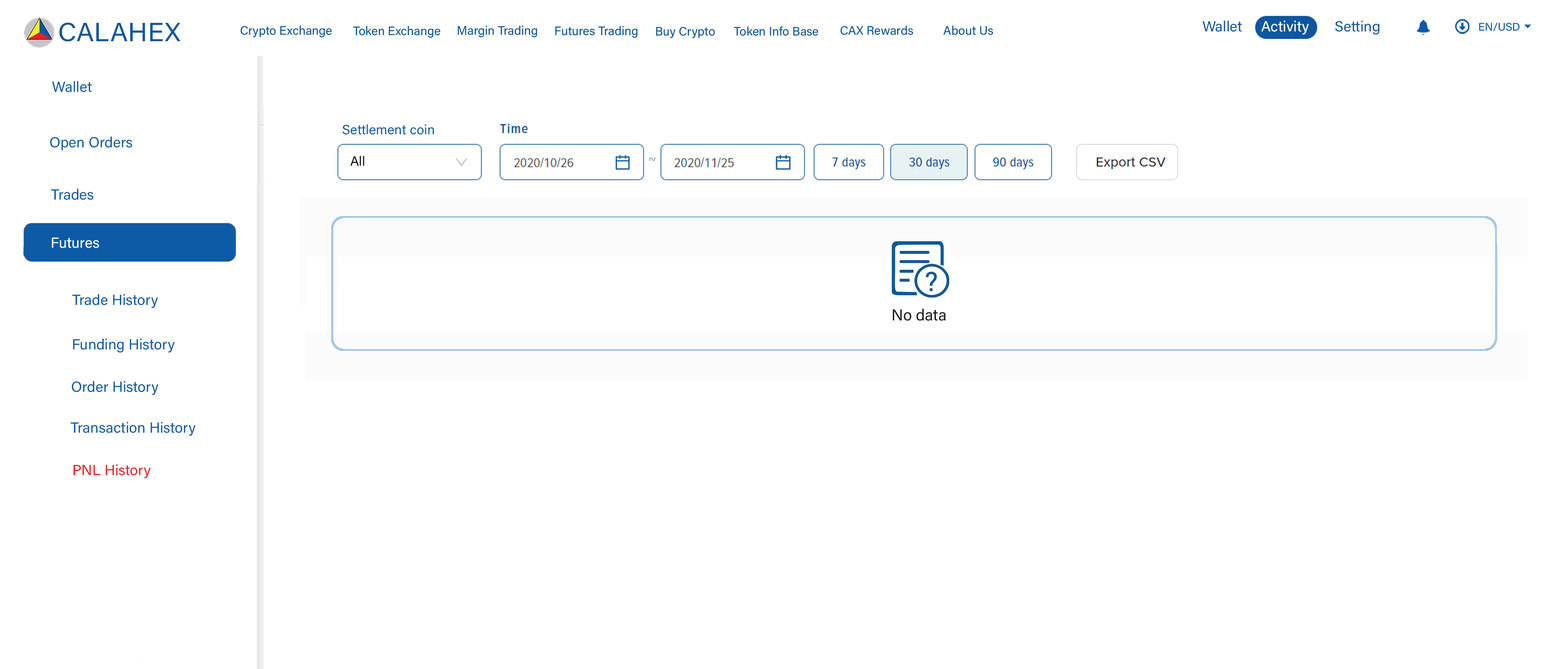
<style>
.page{position:relative;width:1568px;height:669px;background:#ffffff}
.page>*{position:absolute;margin:0}
.t1{font:26.4px "AcuminConcept-Regular";color:#0d57a0;font-style:italic}
.t2{font:12.2px "AcuminConcept-Regular";color:#0d57a0;font-style:italic}
.t3{font:11px "AcuminConcept-Regular";color:#055aaa;font-style:italic}
.t4{font:14.7px "AcuminConcept-Regular";color:#0d5ba6;font-style:italic}
.t5{font:13.5px "AcuminConcept-Regular";color:#0d5ba6;font-style:italic}
.t6{font:13.5px "AcuminConcept-Regular";color:#0a0b0b;font-style:italic}
.t7{font:14.7px "AcuminConcept-Regular";color:#ffffff;font-style:italic}
.t8{font:15.9px "AcuminConcept-Regular";color:#191b1b;font-style:italic}
.t9{font:14.7px "AcuminConcept-Regular";color:#ea1d28;font-style:italic}
</style>
<div class="page">
<p class="t1" style="left:59px;top:22px;width:122px;height:20px">CALAHEX</p>
<p class="t2" style="left:240px;top:25px;width:92px;height:13px">Crypto Exchange</p>
<p class="t2" style="left:353px;top:26px;width:87px;height:12px">Token Exchange</p>
<p class="t2" style="left:458px;top:25px;width:79px;height:13px">Margin Trading</p>
<p class="t2" style="left:555px;top:26px;width:82px;height:12px">Futures Trading</p>
<p class="t2" style="left:656px;top:27px;width:59px;height:11px">Buy Crypto</p>
<p class="t2" style="left:734px;top:26px;width:84px;height:10px">Token Info Base</p>
<p class="t2" style="left:840px;top:25px;width:73px;height:10px">CAX Rewards</p>
<p class="t2" style="left:943px;top:25px;width:50px;height:10px">About Us</p>
<p class="t3" style="left:1479px;top:22px;width:41px;height:9px">EN/USD</p>
<p class="t4" style="left:52px;top:81px;width:40px;height:11px">Wallet</p>
<p class="t5" style="left:342px;top:124px;width:92px;height:11px">Settlement coin</p>
<p class="t4" style="left:50px;top:136px;width:82px;height:15px">Open Orders</p>
<p class="t6" style="left:350px;top:155px;width:14px;height:11px">All</p>
<p class="t4" style="left:51px;top:189px;width:42px;height:11px">Trades</p>
<p class="t7" style="left:52px;top:238px;width:47px;height:10px">Futures</p>
<p class="t4" style="left:72px;top:294px;width:86px;height:14px">Trade History</p>
<p class="t8" style="left:893px;top:309px;width:53px;height:12px">No data</p>
<p class="t4" style="left:73px;top:338px;width:102px;height:15px">Funding History</p>
<p class="t4" style="left:72px;top:381px;width:86px;height:14px">Order History</p>
<p class="t4" style="left:71px;top:422px;width:124px;height:14px">Transaction History</p>
<p class="t9" style="left:73px;top:464px;width:78px;height:14px">PNL History</p>
</div>
